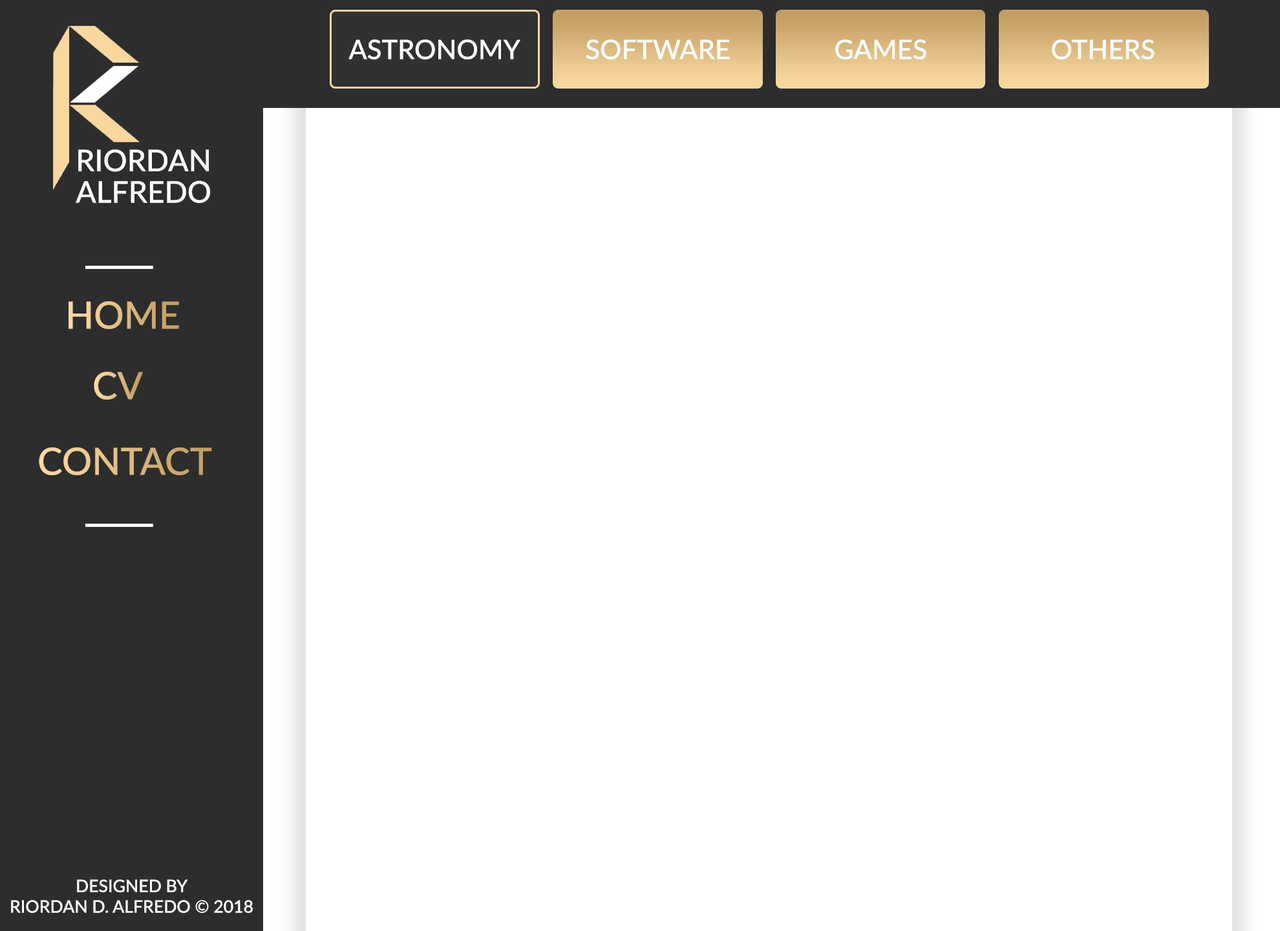
<style>
.page{position:relative;width:1280px;height:931px;background:#ffffff}
.page>*{position:absolute;margin:0}
.t1{font:26.9px "Lato-Medium";color:#ffffff}
.t2{font:29.9px/31.4px "Lato-Medium";color:#ffffff}
.t3{font:37.7px "Lato-Medium"}
.t4{font:17.2px "Lato-Medium";color:#ffffff}
</style>
<div class="page">
<p class="t1" style="left:349px;top:39px;width:172px;height:20px">ASTRONOMY</p>
<p class="t1" style="left:586px;top:39px;width:144px;height:20px">SOFTWARE</p>
<p class="t1" style="left:836px;top:39px;width:91px;height:20px">GAMES</p>
<p class="t1" style="left:1052px;top:39px;width:103px;height:20px">OTHERS</p>
<p class="t2" style="left:76px;top:149px;width:134px;height:54px">RIORDAN <br>ALFREDO</p>
<p class="t3" style="left:69px;top:301px;width:110px;height:28px">HOME</p>
<p class="t3" style="left:94px;top:372px;width:49px;height:28px">CV</p>
<p class="t3" style="left:39px;top:448px;width:173px;height:27px">CONTACT</p>
<p class="t4" style="left:11px;top:880px;width:242px;height:33px;text-align:center">DESIGNED BY<br>RIORDAN D. ALFREDO © 2018</p>
</div>
